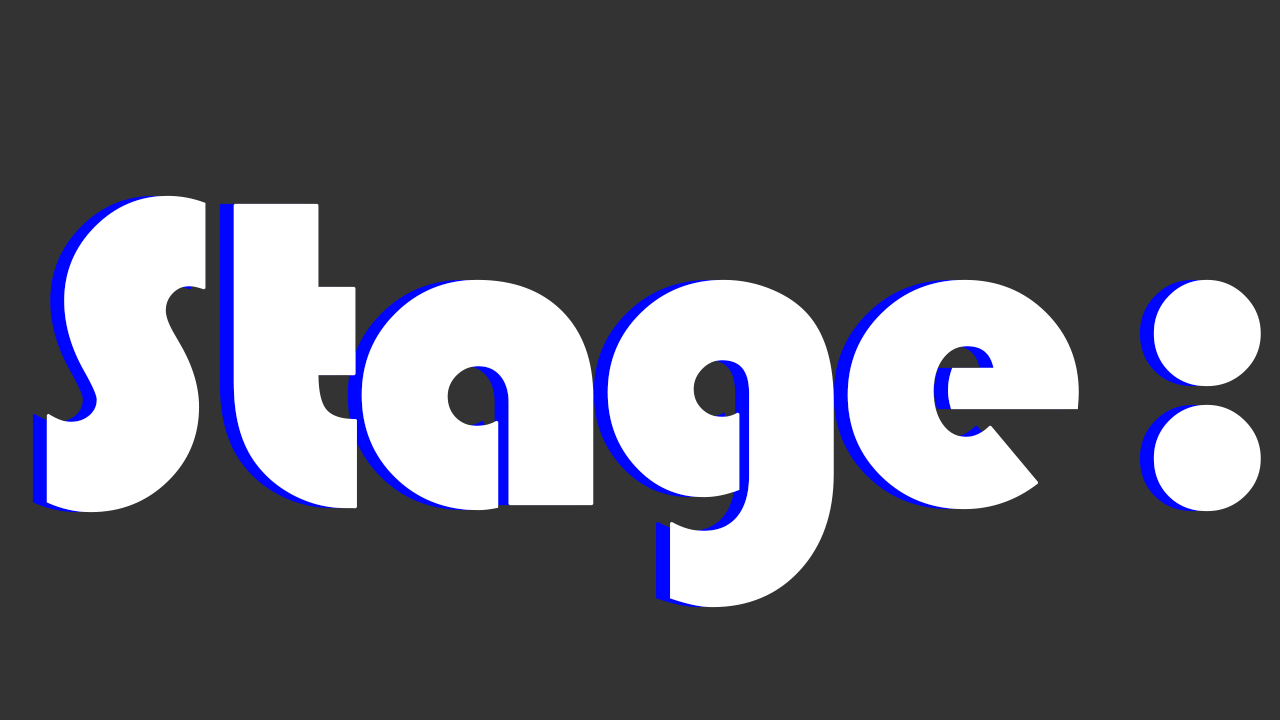
<style>
.page{position:relative;width:1280px;height:720px;background:#333333}
.page>*{position:absolute;margin:0}
.t1{font:107.7px "Bauhaus93";letter-spacing:-0.07em;color:#ffffff;font-weight:bold}
</style>
<div class="page">
<p class="t1" style="left:46px;top:195px;width:1215px;height:413px;text-align:center">S tage  :</p>
</div>
